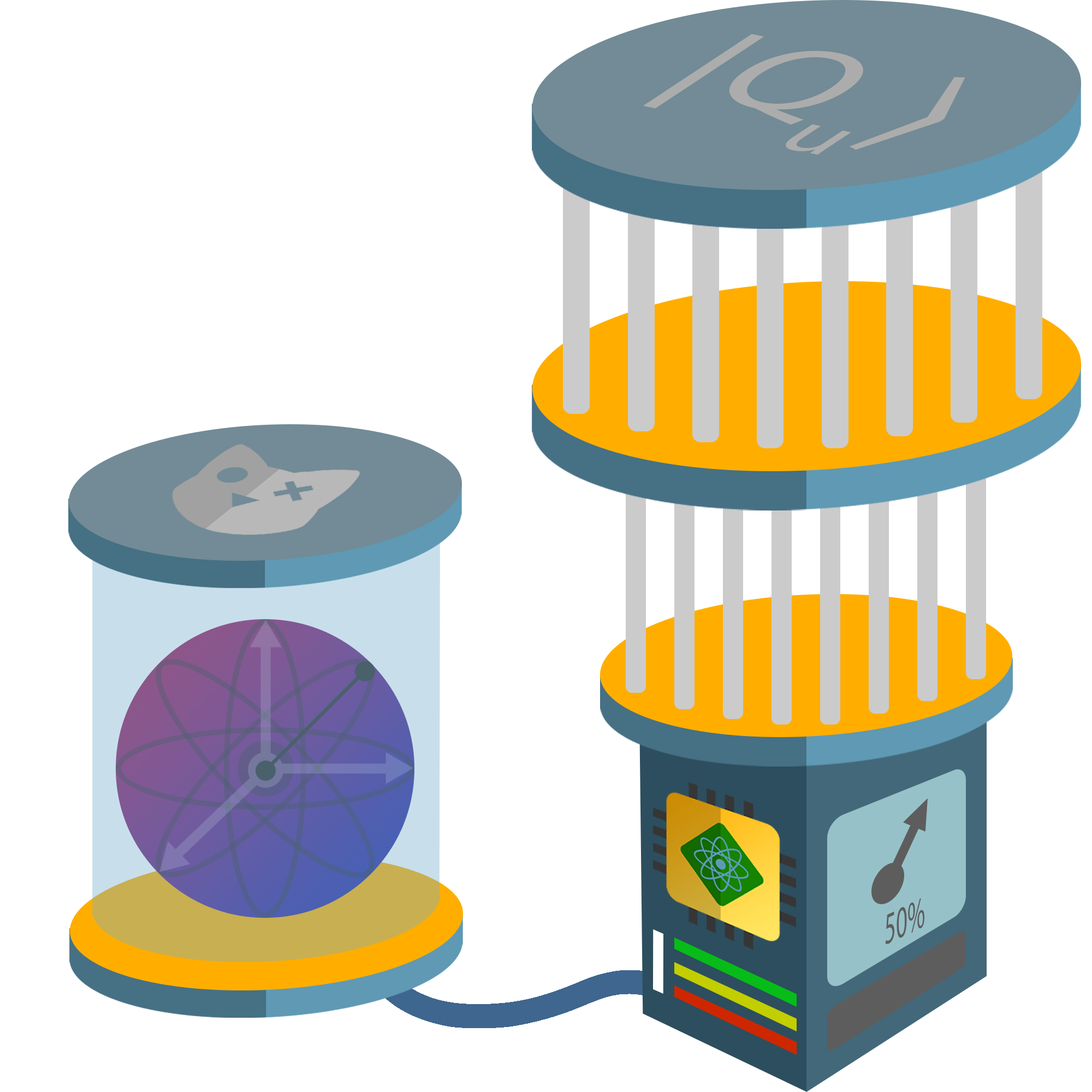
<style>
.page{position:relative;width:1092px;height:1092px;background:#ffffff}
.page>*{position:absolute;margin:0}
.t1{font:143.3px "MyriadPro-Regular";color:#acacac;scale:1.16 1}
.t2{font:143.3px "CambriaMath";color:#acacac;scale:1.16 1}
.t3{font:44.8px "MyriadPro-Regular";color:#5d5d5d;scale:0.55 1}
</style>
<div class="page">
<p class="t1" style="left:643px;top:34px;width:322px;height:121px;rotate:12deg"><span class="t2">|</span>Qu<span class="t2">⟩</span></p>
<p class="t3" style="left:885px;top:898px;width:39px;height:46px;rotate:-25deg">50%</p>
</div>
